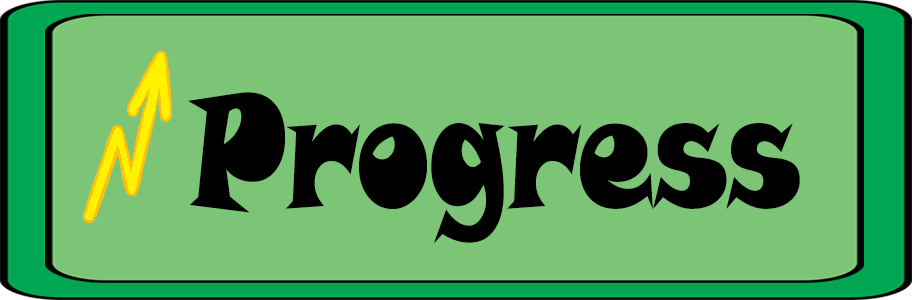
<style>
.page{position:relative;width:912px;height:300px;background:#7cc576}
.page>*{position:absolute;margin:0}
.t1{font:160px "SnapITC-Regular";color:#000000;scale:0.75 1}
</style>
<div class="page">
<p class="t1" style="left:188px;top:92px;width:612px;height:152px">Progress</p>
</div>
